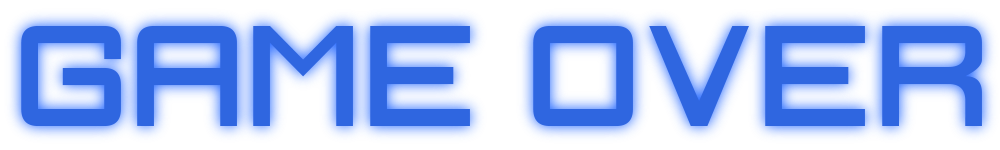
<style>
.page{position:relative;width:1000px;height:150px;background:#2f66e0}
.page>*{position:absolute;margin:0}
.t1{font:170px "IgnisetGlaciesSharp";color:#2f66e0}
</style>
<div class="page">
<p class="t1" style="left:21px;top:26px;width:961px;height:100px">Game Over</p>
</div>
